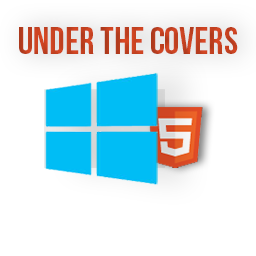
<style>
.page{position:relative;width:256px;height:256px;background:#ffffff}
.page>*{position:absolute;margin:0}
.t1{font:37.9px "BebasNeue";color:#c44121}
</style>
<div class="page">
<p class="t1" style="left:19px;top:27px;width:219px;height:27px">Under The Covers</p>
</div>
